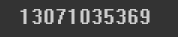
<style>
.page{position:relative;width:178px;height:37px;background:#333333}
.page>*{position:absolute;margin:0}
.t1{font:24px "System";color:#cccccc}
</style>
<div class="page">
<p class="t1" style="left:20px;top:9px;width:130px;height:15px">13071035369</p>
</div>
